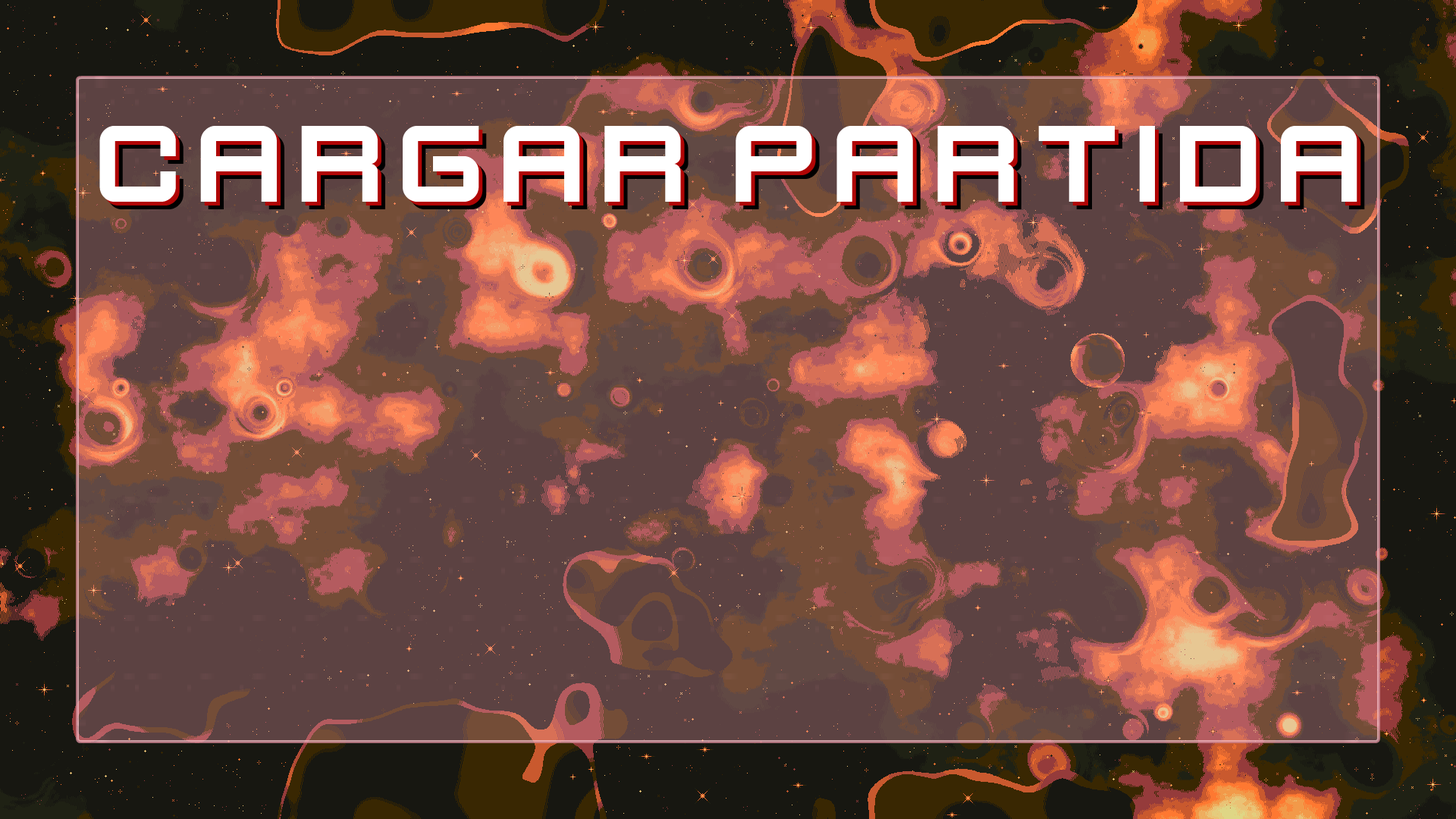
<style>
.page{position:relative;width:1456px;height:819px;background:#5c4242}
.page>*{position:absolute;margin:0}
.t1{font:121.3px "KenVector-Future";color:#ffffff}
</style>
<div class="page">
<p class="t1" style="left:99px;top:126px;width:1258px;height:76px">cargar partida</p>
<p class="t1" style="left:103px;top:130px;width:1258px;height:76px">cargar partida</p>
</div>
